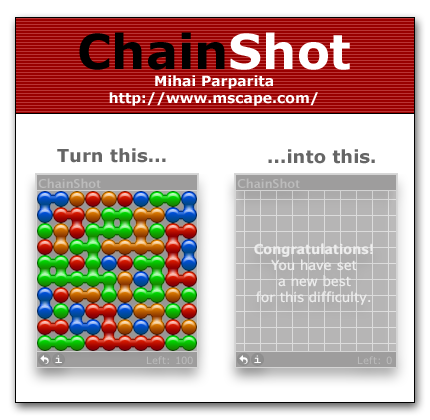
<style>
.page{position:relative;width:430px;height:420px;background:#ffffff}
.page>*{position:absolute;margin:0}
.t1{font:14px "Verdana-Bold";color:#ffffff}
.t2{font:48px "Verdana-Bold";color:#000000}
.t3{font:48px "Verdana-Bold";color:#ffffff}
.t4{font:18px "Verdana-Bold";color:#666666}
</style>
<div class="page">
<p class="t1" style="left:79px;top:32px;width:271px;height:74px;text-align:center"><span class="t2">Chain</span><span class="t3">Shot<br></span>Mihai Parparita<br>http://www.mscape.com/</p>
<p class="t4" style="left:57px;top:148px;width:109px;height:15px">Turn this...</p>
<p class="t4" style="left:268px;top:149px;width:107px;height:15px">...into this.</p>
</div>
